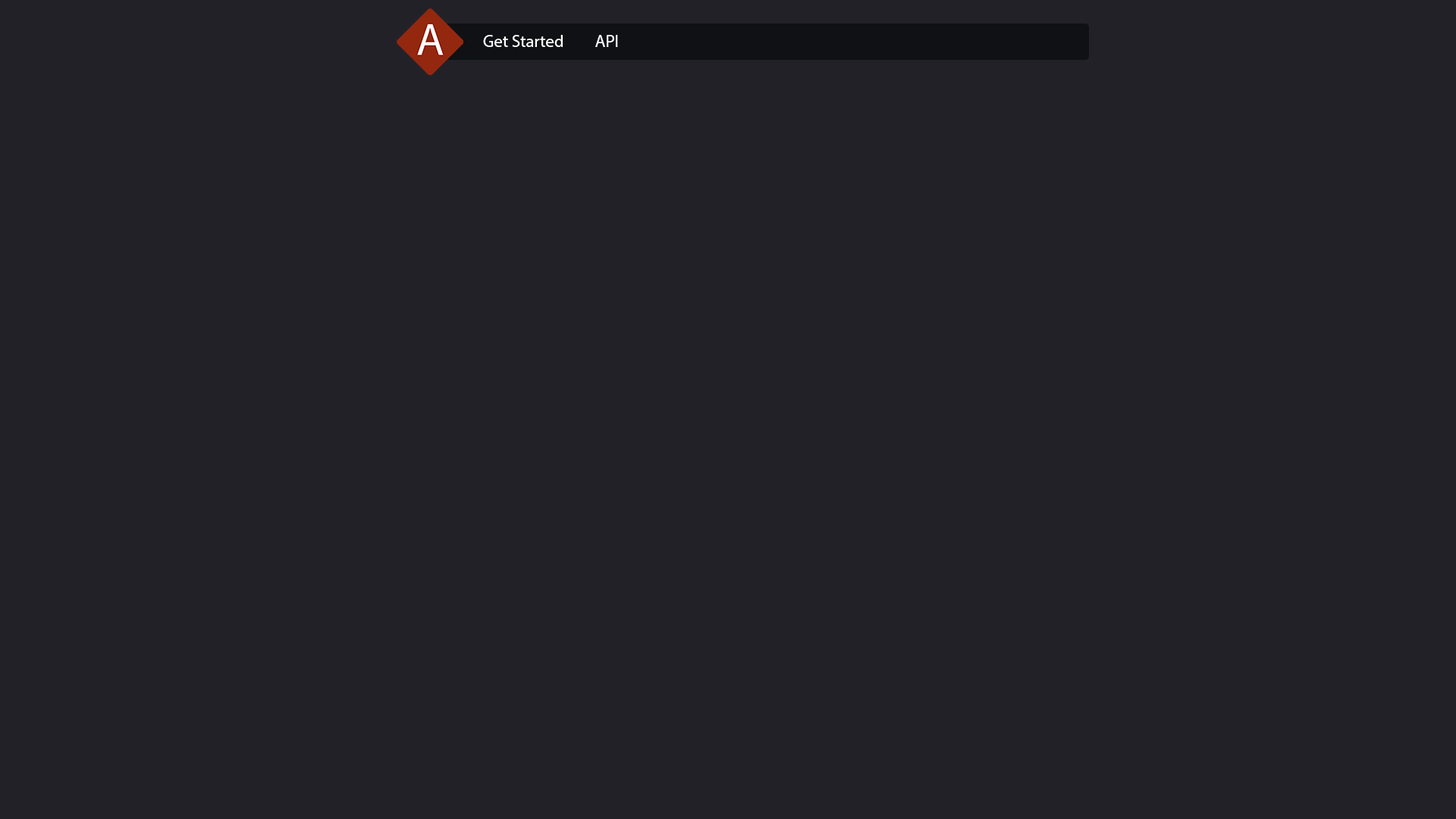
<style>
.page{position:relative;width:1456px;height:819px;background:#232128}
.page>*{position:absolute;margin:0}
.t1{font:17.1px "MyriadPro-Regular";color:#ffffff}
</style>
<div class="page">
<p class="t1" style="left:483px;top:35px;width:80px;height:12px">Get Started</p>
<p class="t1" style="left:595px;top:35px;width:23px;height:12px">API</p>
</div>
